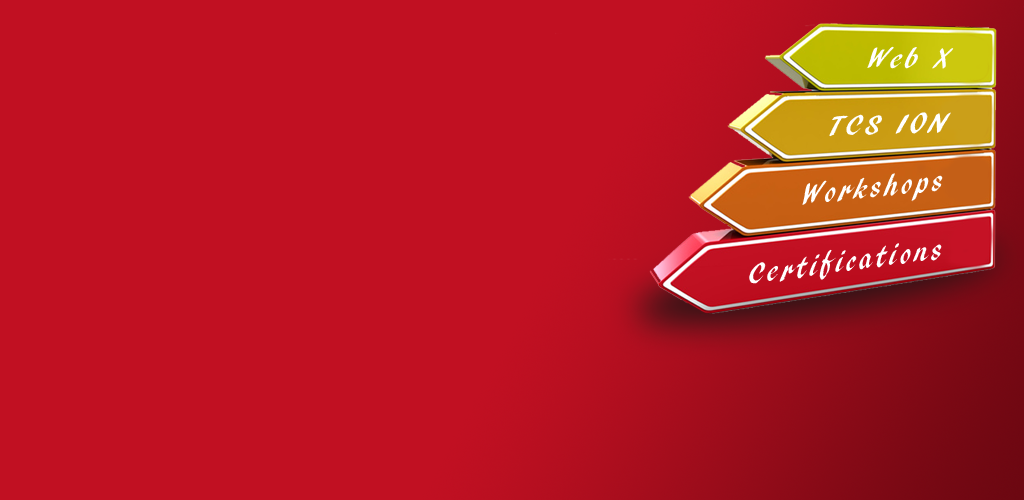
<style>
.page{position:relative;width:1024px;height:500px;background:#c11022}
.page>*{position:absolute;margin:0}
.t1{font:29.4px "ARBLANCA";letter-spacing:0.1em;color:#ffffff}
</style>
<div class="page">
<p class="t1" style="left:867px;top:46px;width:87px;height:23px;rotate:1deg">Web X</p>
<p class="t1" style="left:829px;top:112px;width:122px;height:25px;rotate:-2deg">TCS ION</p>
<p class="t1" style="left:802px;top:173px;width:141px;height:32px;rotate:-6deg">Workshops</p>
<p class="t1" style="left:749px;top:243px;width:193px;height:41px;rotate:-8deg">Certifications</p>
</div>
